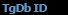
<style>
.page{position:relative;width:68px;height:15px;background:#000000}
.page>*{position:absolute;margin:0}
.t1{font:11px "Verdana-Bold";letter-spacing:-0.08em;color:#6699cc}
</style>
<div class="page">
<p class="t1" style="left:2px;top:3px;width:46px;height:11px">TgDb ID</p>
</div>
